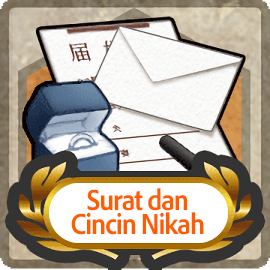
<style>
.page{position:relative;width:270px;height:270px}
.page>*{position:absolute;margin:0}
.t1{font:30px/24px "AdobeClean-Bold";letter-spacing:-0.04em;color:#ff5d00;scale:0.9 1}
</style>
<div class="page">
<p class="t1" style="left:71px;top:188px;width:133px;height:47px;text-align:center">Surat dan<br>Cincin Nikah</p>
</div>
